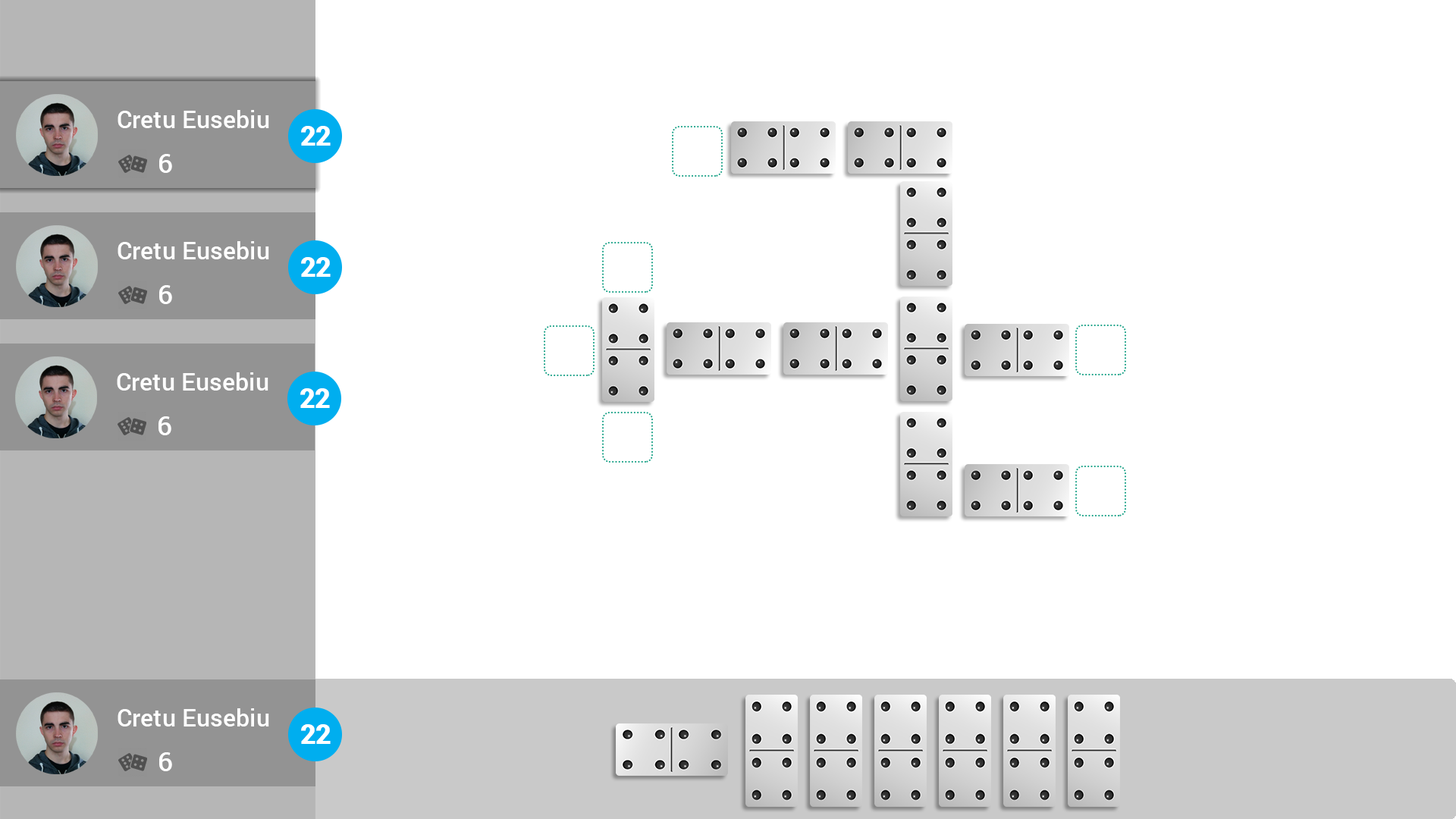
<style>
.page{position:relative;width:1456px;height:819px;background:#ffffff}
.page>*{position:absolute;margin:0}
.t1{font:24.5px "Roboto-Medium";color:#ffffff}
.t2{font:27.2px "Roboto-Black";color:#ffffff}
.t3{font:26.3px "Roboto-Medium";color:#ffffff}
</style>
<div class="page">
<p class="t1" style="left:118px;top:110px;width:151px;height:18px">Cretu Eusebiu</p>
<p class="t2" style="left:301px;top:126px;width:30px;height:20px">22</p>
<p class="t3" style="left:159px;top:154px;width:13px;height:19px">6</p>
<p class="t1" style="left:118px;top:241px;width:151px;height:18px">Cretu Eusebiu</p>
<p class="t2" style="left:301px;top:257px;width:30px;height:20px">22</p>
<p class="t3" style="left:159px;top:285px;width:13px;height:19px">6</p>
<p class="t1" style="left:117px;top:372px;width:151px;height:19px">Cretu Eusebiu</p>
<p class="t2" style="left:300px;top:388px;width:30px;height:20px">22</p>
<p class="t3" style="left:158px;top:416px;width:13px;height:19px">6</p>
<p class="t1" style="left:118px;top:708px;width:151px;height:18px">Cretu Eusebiu</p>
<p class="t2" style="left:301px;top:724px;width:30px;height:20px">22</p>
<p class="t3" style="left:159px;top:752px;width:13px;height:19px">6</p>
</div>
